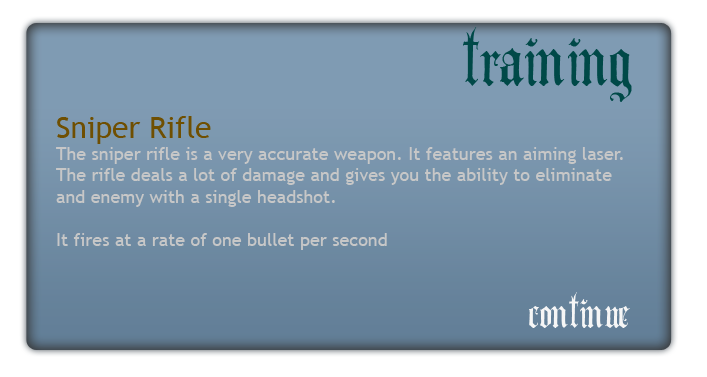
<style>
.page{position:relative;width:707px;height:377px}
.page>*{position:absolute;margin:0}
.t1{font:100px "AngloText";color:#004948}
.t2{font:18px "TrebuchetMS";color:#c7c7c7}
.t3{font:30px "TrebuchetMS";color:#6f4f01}
.t4{font:60px "AngloText";color:#f6f6f6}
</style>
<div class="page">
<p class="t1" style="left:463px;top:27px;width:169px;height:75px">training</p>
<p class="t2" style="left:56px;top:116px;width:567px;height:134px"><span class="t3">Sniper Rifle<br></span>The sniper rifle is a very accurate weapon. It features an aiming laser.<br>The rifle deals a lot of damage and gives you the ability to eliminate<br>and enemy with a single headshot.<br><br>It fires at a rate of one bullet per second</p>
<p class="t4" style="left:529px;top:292px;width:101px;height:36px">continue</p>
</div>
